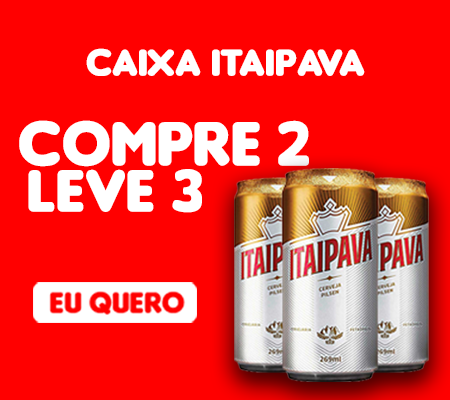
<style>
.page{position:relative;width:450px;height:400px;background:#ff0000}
.page>*{position:absolute;margin:0}
.t1{font:40px "Insaniburger";color:#ffffff}
.t2{font:66.6px "Insaniburger";color:#ffffff}
.t3{font:63.6px "Insaniburger";color:#ffffff}
</style>
<div class="page">
<p class="t1" style="left:86px;top:48px;width:279px;height:28px">caixa itaipava</p>
<p class="t2" style="left:19px;top:120px;width:290px;height:47px">compre 2</p>
<p class="t3" style="left:28px;top:169px;width:174px;height:44px">leve 3</p>
</div>
